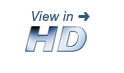
<style>
.page{position:relative;width:124px;height:73px;background:#ffffff}
.page>*{position:absolute;margin:0}
.t1{font:13px "HelveticaNeueLTStd-It";letter-spacing:0.016em;color:#335977}
.t2{font:15px "ZapfDingbatsITC";letter-spacing:0.016em;color:#335977;scale:0.89 1}
</style>
<div class="page">
<p class="t1" style="left:32px;top:11px;width:58px;height:10px">View in <span class="t2">➜</span></p>
</div>
